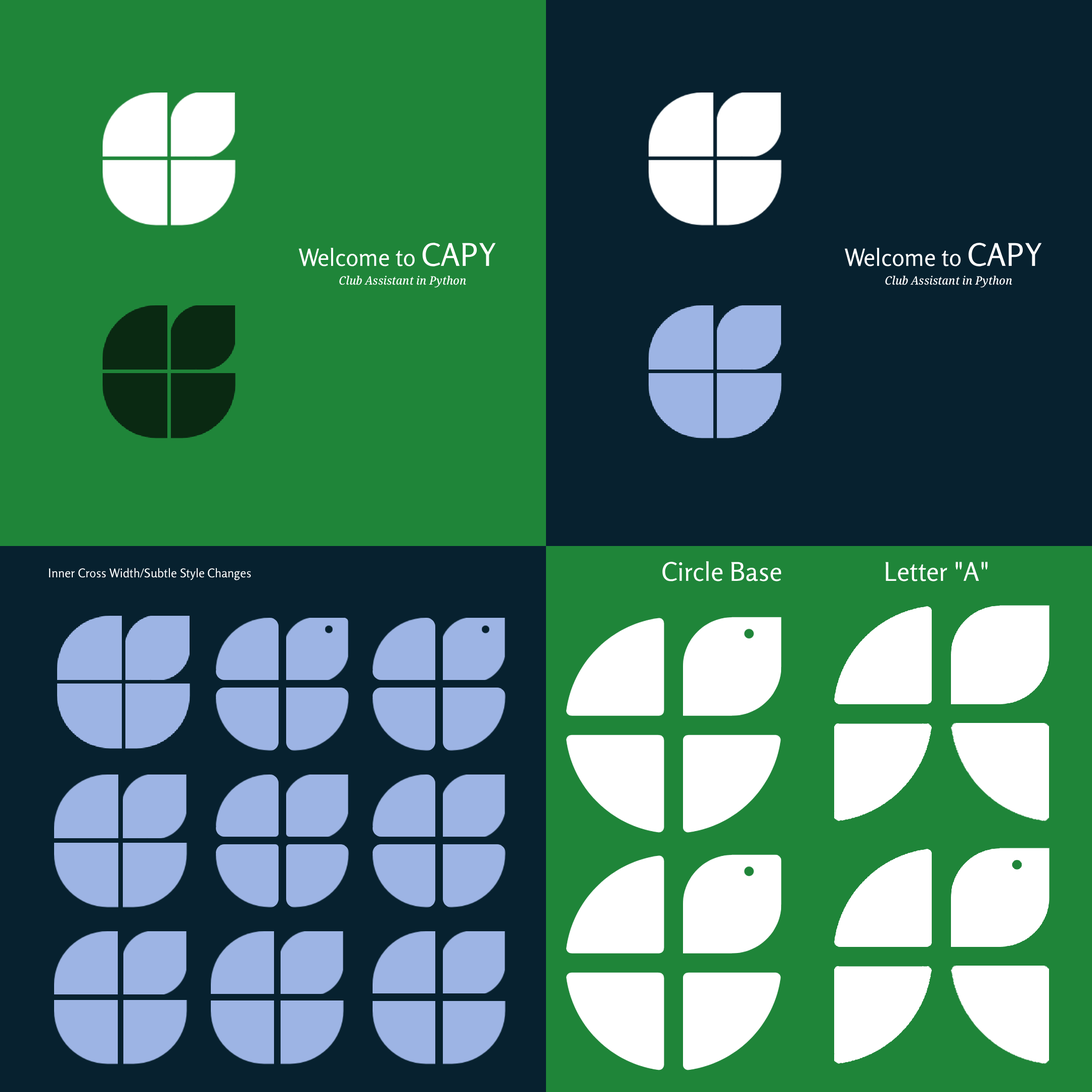
<style>
.page{position:relative;width:1092px;height:1092px;background:#1f8539}
.page>*{position:absolute;margin:0}
.t1{font:23.8px "Rosario-Regular";color:#ffffff}
.t2{font:31.3px "Rosario-Regular";color:#ffffff}
.t3{font:11.6px "NotoSerif-SemiCondensedMediumItalic";color:#ffffff}
.t4{font:12.1px "Rosario-Regular";color:#ffffff}
.t5{font:25.8px "Rosario-Regular";color:#ffffff}
</style>
<div class="page">
<p class="t1" style="left:298px;top:243px;width:198px;height:23px">Welcome to <span class="t2">CAPY</span></p>
<p class="t1" style="left:844px;top:243px;width:198px;height:23px">Welcome to <span class="t2">CAPY</span></p>
<p class="t3" style="left:339px;top:276px;width:127px;height:12px">Club Assistant in Python</p>
<p class="t3" style="left:885px;top:276px;width:127px;height:12px">Club Assistant in Python</p>
<p class="t4" style="left:49px;top:568px;width:202px;height:12px">Inner Cross Width/Subtle Style Changes</p>
<p class="t5" style="left:662px;top:561px;width:120px;height:20px">Circle Base</p>
<p class="t5" style="left:885px;top:562px;width:103px;height:19px">Letter "A"</p>
</div>
